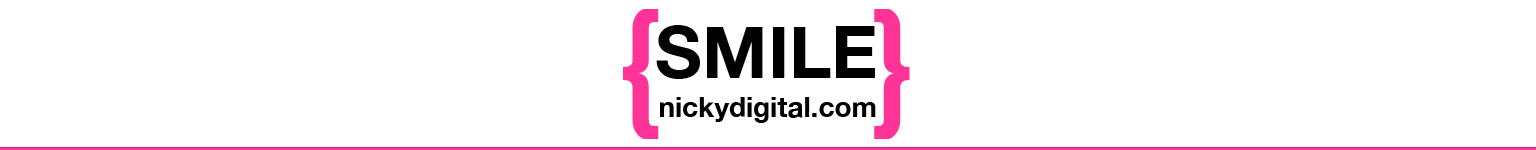
<style>
.page{position:relative;width:1536px;height:150px;background:#ffffff}
.page>*{position:absolute;margin:0}
.t1{font:140px "HelveticaCYBold";color:#ff3398}
.t2{font:72px "HelveticaNeue-Bold";color:#010101}
.t3{font:28px "HelveticaNeue-Bold";color:#010101}
</style>
<div class="page">
<p class="t1" style="left:623px;top:9px;width:36px;height:130px">{</p>
<p class="t1" style="left:874px;top:9px;width:36px;height:130px">}</p>
<p class="t2" style="left:656px;top:25px;width:219px;height:54px">SMILE</p>
<p class="t3" style="left:660px;top:97px;width:216px;height:26px">nickydigital.com</p>
</div>
